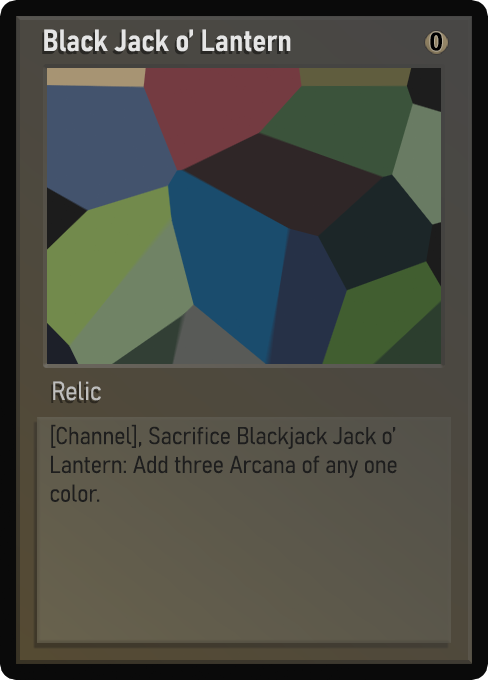
<style>
.page{position:relative;width:488px;height:680px}
.page>*{position:absolute;margin:0}
.t1{font:30px "Bahnschrift-SemiBoldSemiCondensed";color:#f2f2f2;font-weight:bold}
.t2{font:25px "WTRRoycroft";color:#000000;font-weight:bold;scale:1.09 1}
.t3{font:26px "Bahnschrift-LightSemiCondensed";color:#c8c8c8;font-weight:bold}
.t4{font:24px "Bahnschrift-LightSemiCondensed";color:#1e1e1e;font-weight:bold}
</style>
<div class="page">
<p class="t1" style="left:44px;top:29px;width:247px;height:23px;opacity:0.9">Black Jack o’ Lantern</p>
<p class="t2" style="left:430px;top:32px;width:12px;height:19px">0</p>
<p class="t3" style="left:53px;top:381px;width:48px;height:20px;opacity:0.9">Relic</p>
<p class="t4" style="left:50px;top:424px;width:347px;height:78px">[Channel], Sacrifice Blackjack Jack o’ Lantern: Add three Arcana of any one color.</p>
</div>
